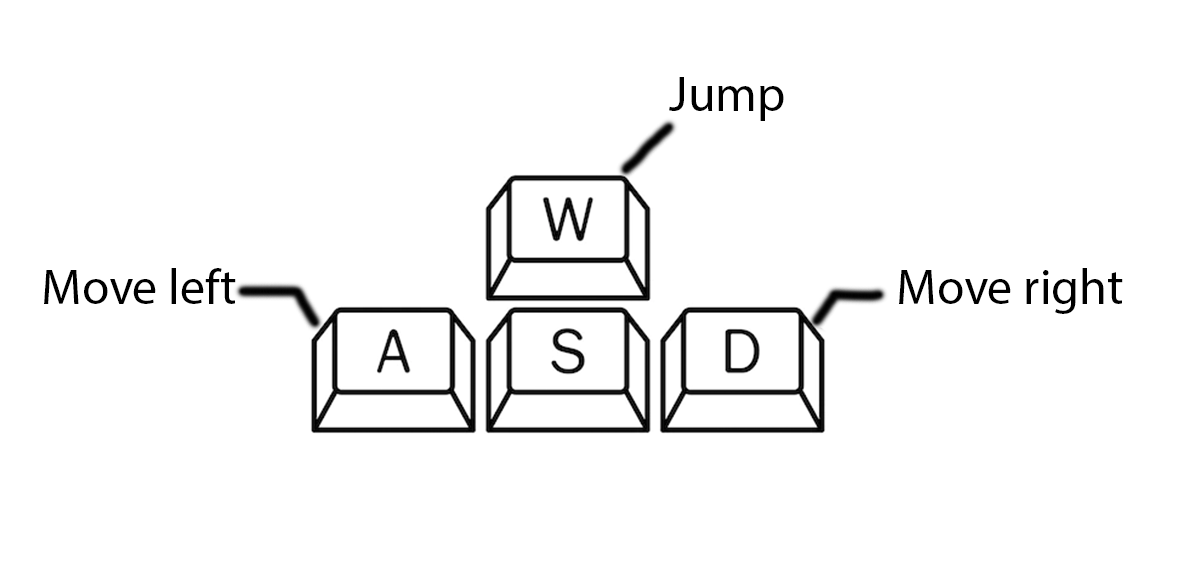
<style>
.page{position:relative;width:1182px;height:582px;background:#ffffff}
.page>*{position:absolute;margin:0}
.t1{font:50px "MyriadPro-Regular";color:#000000}
</style>
<div class="page">
<p class="t1" style="left:669px;top:77px;width:115px;height:44px">Jump</p>
<p class="t1" style="left:44px;top:268px;width:192px;height:36px">Move left</p>
<p class="t1" style="left:899px;top:268px;width:224px;height:46px">Move right</p>
</div>
